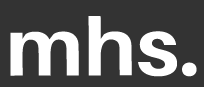
<style>
.page{position:relative;width:204px;height:87px;background:#333333}
.page>*{position:absolute;margin:0}
.t1{font:80px "Aileron-Bold";color:#ffffff;scale:1.07 1}
</style>
<div class="page">
<p class="t1" style="left:10px;top:16px;width:187px;height:61px">mhs.</p>
</div>
